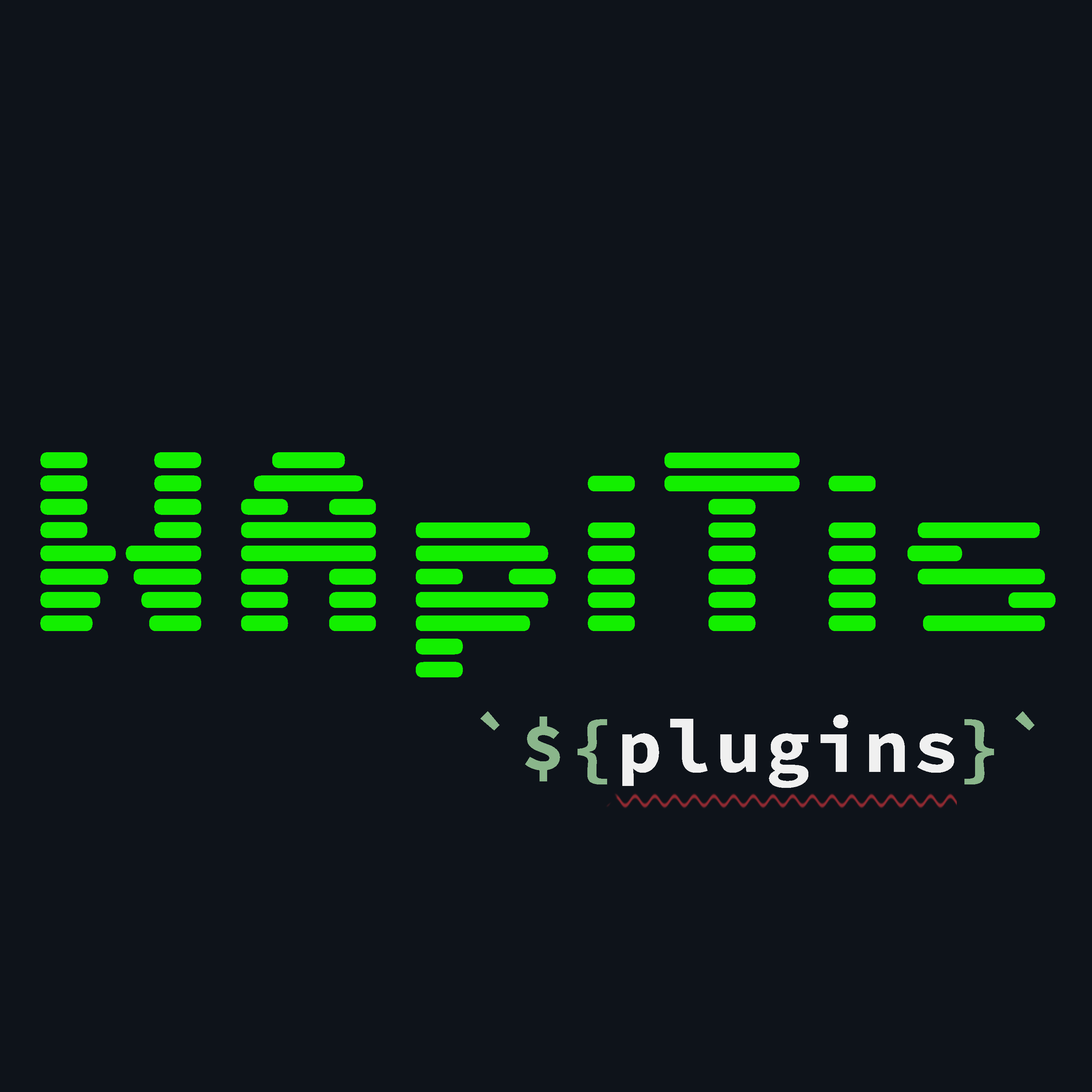
<style>
.page{position:relative;width:1092px;height:1092px;background:#0e131a}
.page>*{position:absolute;margin:0}
.t1{font:284.8px "DS-Terminal";letter-spacing:0.05em;color:#13ef00}
.t2{font:75.9px "SourceCodePro-Bold";letter-spacing:0.05em;color:#8ab68b}
.t3{font:75.9px "SourceCodePro-Bold";letter-spacing:0.05em;color:#f0f0f0}
</style>
<div class="page">
<p class="t1" style="left:40px;top:452px;width:1016px;height:225px">WApiTis</p>
<p class="t2" style="left:480px;top:711px;width:127px;height:73px">`${</p>
<p class="t2" style="left:964px;top:711px;width:71px;height:73px">}`</p>
<p class="t3" style="left:622px;top:715px;width:332px;height:73px">plugins</p>
</div>
